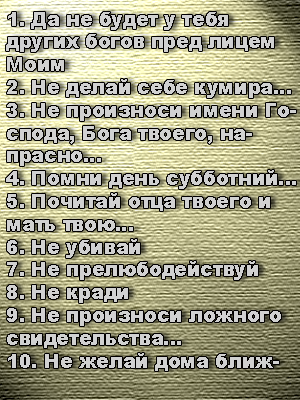
<style>
.page{position:relative;width:300px;height:400px}
.page>*{position:absolute;margin:0}
.t1{font:19px "Arial-Black";color:#d1d1d1}
</style>
<div class="page">
<p class="t1" style="left:6px;top:12px;width:290px;height:359px">1. Да не будет у тебя других богов пред лицем Моим<br>2. Не делай себе кумира...<br>3. Не произноси имени Господа, Бога твоего, напрасно...<br>4. Помни день субботний...<br>5. Почитай отца твоего и мать твою...<br>6. Не убивай<br>7. Не прелюбодействуй<br>8. Не кради<br>9. Не произноси ложного свидетельства... <br>10. Не желай дома ближнего твоего...</p>
</div>
